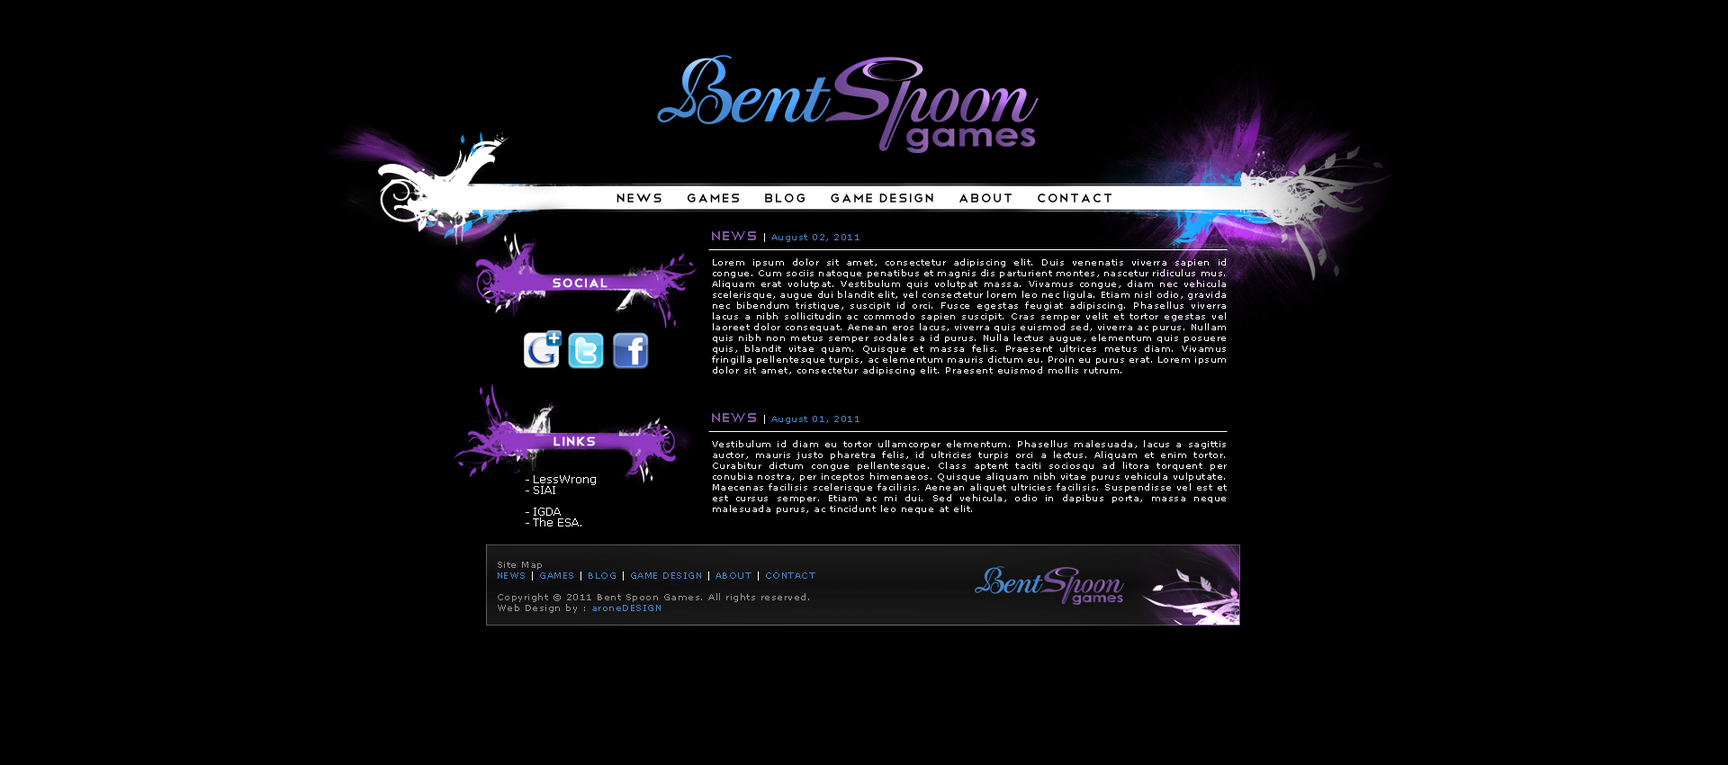
<style>
.page{position:relative;width:1728px;height:765px;background:#000000}
.page>*{position:absolute;margin:0}
.t1{font:16.2px "Telegrafico";letter-spacing:0.05em;color:#000000}
.t2{font:9px "Verdana";letter-spacing:0.05em;color:#4688ce}
.t3{font:16.2px "Telegrafico";letter-spacing:0.05em;color:#7f579f}
.t4{font:9px "Verdana";letter-spacing:0.05em;color:#ffffff}
.t5{font:9px/10.8px "Verdana";letter-spacing:0.05em;color:#ffffff}
.t6{font:16.2px "Telegrafico";color:#ffffff;text-transform:uppercase;font-weight:bold}
.t7{font:16.2px "Telegrafico";letter-spacing:0.05em;color:#7f57a0}
.t8{font:10.8px/10.8px "Verdana";color:#ffffff}
.t9{font:9px/10.8px "Verdana";letter-spacing:0.05em;color:#959595}
.t10{font:9px/10.8px "Verdana";letter-spacing:0.05em;color:#4688ce;text-transform:uppercase}
.t11{font:9px/10.8px "Verdana";letter-spacing:0.05em;color:#ffffff;text-transform:uppercase}
.t12{font:9px/10.8px "Verdana";letter-spacing:0.05em;color:#4688ce}
</style>
<div class="page">
<p class="t1" style="left:616px;top:194px;width:496px;height:8px">news     games     blog     game design     about     contact</p>
<p class="t2" style="left:712px;top:231px;width:148px;height:11px"><span class="t3">News</span><span class="t4"> | </span>August 02, 2011</p>
<p class="t5" style="left:712px;top:258px;width:514px;height:117px;text-align:justify">Lorem ipsum dolor sit amet, consectetur adipiscing elit. Duis venenatis viverra sapien id congue. Cum sociis natoque penatibus et magnis dis parturient montes, nascetur ridiculus mus. Aliquam erat volutpat. Vestibulum quis volutpat massa. Vivamus congue, diam nec vehicula scelerisque, augue dui blandit elit, vel consectetur lorem leo nec ligula. Etiam nisl odio, gravida nec bibendum tristique, suscipit id orci. Fusce egestas feugiat adipiscing. Phasellus viverra lacus a nibh sollicitudin ac commodo sapien suscipit. Cras semper velit et tortor egestas vel laoreet dolor consequat. Aenean eros lacus, viverra quis euismod sed, viverra ac purus. Nullam quis nibh non metus semper sodales a id purus. Nulla lectus augue, elementum quis posuere quis, blandit vitae quam. Quisque et massa felis. Praesent ultrices metus diam. Vivamus fringilla pellentesque turpis, ac elementum mauris dictum eu. Proin eu purus erat. Lorem ipsum dolor sit amet, consectetur adipiscing elit. Praesent euismod mollis rutrum.</p>
<p class="t6" style="left:553px;top:278px;width:55px;height:10px">social</p>
<p class="t2" style="left:712px;top:413px;width:148px;height:11px"><span class="t7">News </span><span class="t4">| </span>August 01, 2011</p>
<p class="t6" style="left:554px;top:436px;width:41px;height:10px">Links</p>
<p class="t5" style="left:712px;top:440px;width:515px;height:74px;text-align:justify">Vestibulum id diam eu tortor ullamcorper elementum. Phasellus malesuada, lacus a sagittis auctor, mauris justo pharetra felis, id ultricies turpis orci a lectus. Aliquam et enim tortor. Curabitur dictum congue pellentesque. Class aptent taciti sociosqu ad litora torquent per conubia nostra, per inceptos himenaeos. Quisque aliquam nibh vitae purus vehicula vulputate. Maecenas facilisis scelerisque facilisis. Aenean aliquet ultricies facilisis. Suspendisse vel est et est cursus semper. Etiam ac mi dui. Sed vehicula, odio in dapibus porta, massa neque malesuada purus, ac tincidunt leo neque at elit.</p>
<p class="t8" style="left:526px;top:475px;width:70px;height:51px;text-align:justify">- LessWrong<br>- SIAI<br><br>- IGDA<br>- The ESA.</p>
<p class="t9" style="left:498px;top:562px;width:317px;height:51px;text-align:justify">Site Map<br><span class="t10">news</span><span class="t11"> | </span><span class="t10">games </span><span class="t11">|</span><span class="t10"> blog </span><span class="t11">|</span><span class="t10"> game design</span><span class="t11"> | </span><span class="t10">about</span><span class="t11"> | </span><span class="t10">contact<br><br></span>Copyright © 2011 Bent Spoon Games. All rights reserved.<br>Web Design by : <span class="t12">aroneDESIGN</span></p>
</div>
